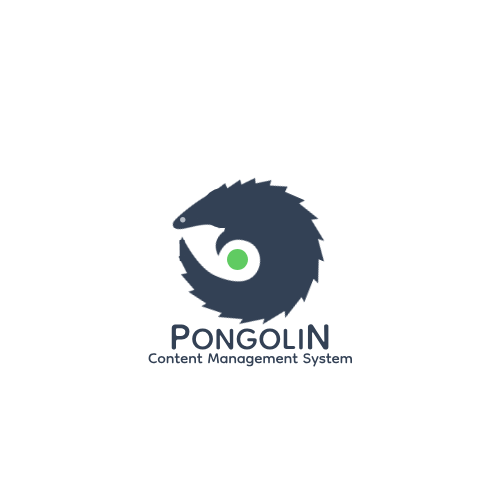
<style>
.page{position:relative;width:500px;height:500px;background:#ffffff}
.page>*{position:absolute;margin:0}
.t1{font:50px "Dongle-Regular";color:#334155}
.t2{font:61px "Dongle-Regular";color:#334155}
.t3{font:24px "Dongle-Regular";color:#334155}
</style>
<div class="page">
<p class="t1" style="left:171px;top:324px;width:158px;height:26px"><span class="t2">P</span>ONGOLI<span class="t2">N</span></p>
<p class="t3" style="left:148px;top:353px;width:204px;height:14px">Content Management System</p>
</div>
